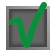
<style>
.page{position:relative;width:56px;height:56px;background:#ffffff}
.page>*{position:absolute;margin:0}
.t1{font:58.3px "SegoeScript-Bold";letter-spacing:0.075em;color:#0b8d3d}
</style>
<div class="page">
<p class="t1" style="left:8px;top:2px;width:39px;height:46px">√</p>
</div>
